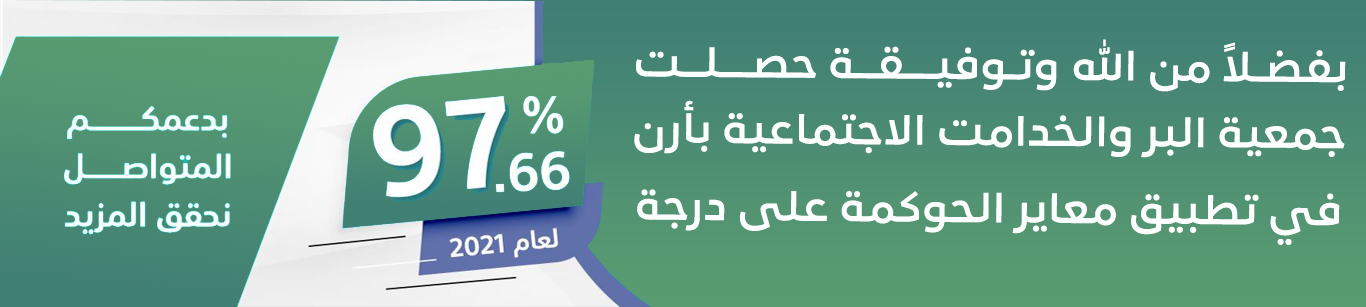
<style>
.page{position:relative;width:1366px;height:307px}
.page>*{position:absolute;margin:0}
.t1{font:40.4px "LoewNextArabic-Bold";color:#fcfffd}
</style>
<div class="page">
<p class="t1" style="left:636px;top:39px;width:710px;height:53px">بفضـلاً من الله وتـوفيـــقــة حصـــلــت</p>
<p class="t1" style="left:634px;top:100px;width:711px;height:58px">جمعية البر والخدامت الاجتماعية بأرن</p>
<p class="t1" style="left:637px;top:189px;width:703px;height:56px">في تطبيق معاير الحوكمة على درجة</p>
</div>
